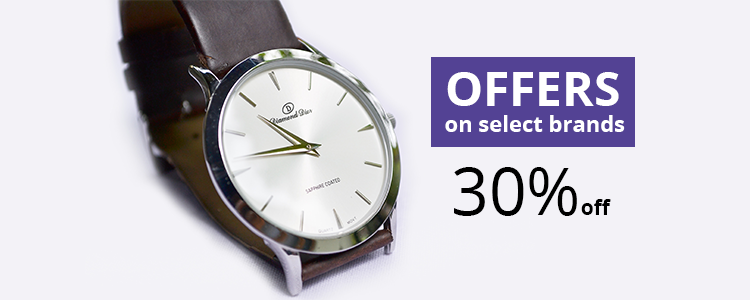
<style>
.page{position:relative;width:750px;height:300px;background:#f3f2f7}
.page>*{position:absolute;margin:0}
.t1{font:22px "OpenSans-Bold";color:#ffffff}
.t2{font:48px "OpenSans-Bold";color:#ffffff}
.t3{font:66px "OpenSans";color:#000000}
.t4{font:21px "OpenSans-Bold";color:#000000}
</style>
<div class="page">
<p class="t1" style="left:445px;top:72px;width:180px;height:60px"><span class="t2">OFFERS<br></span>on select brands</p>
<p class="t3" style="left:454px;top:167px;width:157px;height:49px">30%<span class="t4">off</span></p>
</div>
